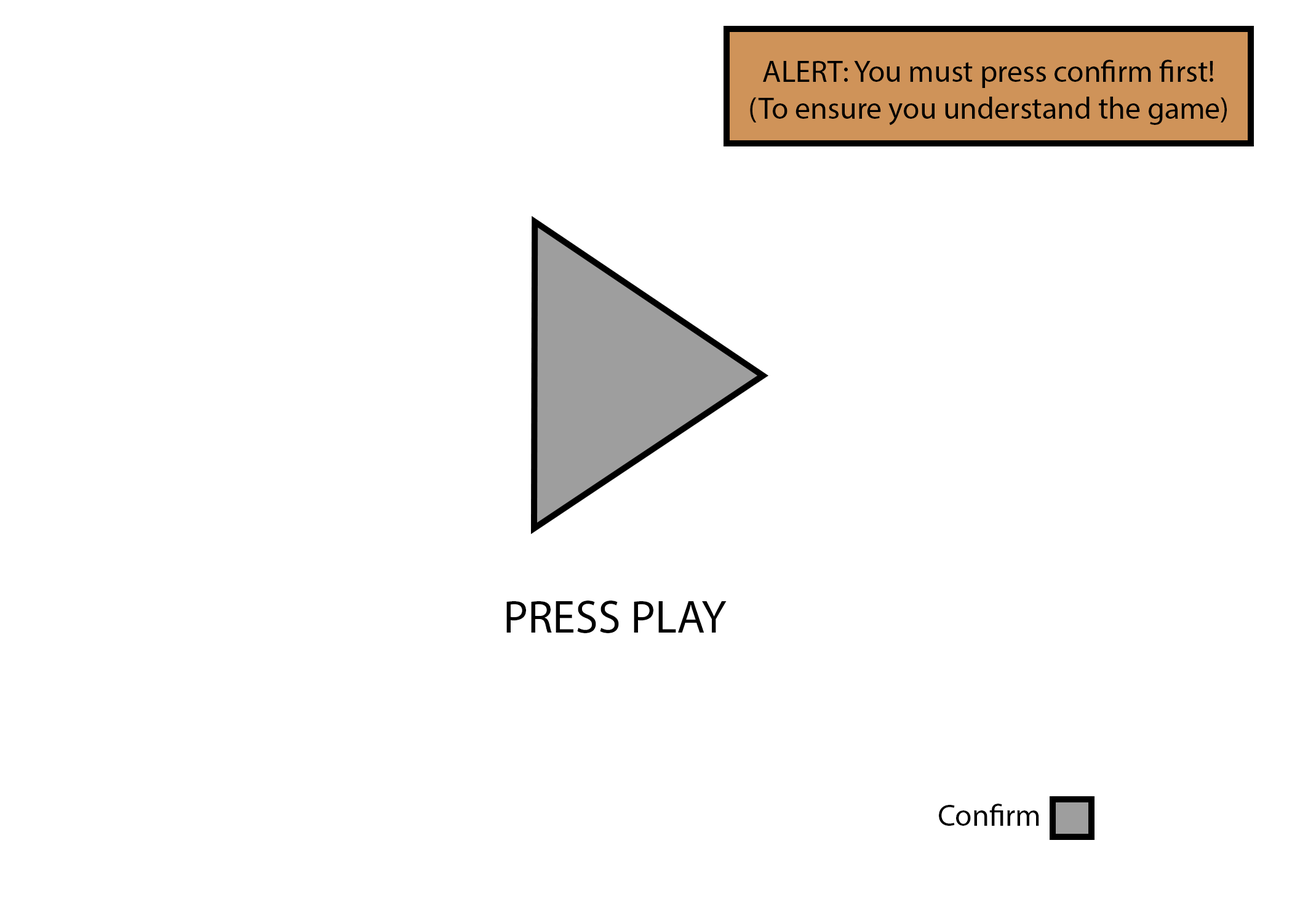
<style>
.page{position:relative;width:1292px;height:923px;background:#ffffff}
.page>*{position:absolute;margin:0}
.t1{font:30.8px "MyriadPro-Regular";color:#000000}
.t2{font:46.1px "MyriadPro-Regular";color:#000000}
</style>
<div class="page">
<p class="t1" style="left:750px;top:60px;width:477px;height:66px;text-align:center">ALERT: You must press confirm first!<br>(To ensure you understand the game)</p>
<p class="t2" style="left:506px;top:600px;width:221px;height:33px">PRESS PLAY</p>
<p class="t1" style="left:939px;top:804px;width:100px;height:22px">Confirm</p>
</div>
